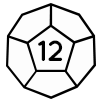
<style>
.page{position:relative;width:100px;height:100px;background:#fdfdfd}
.page>*{position:absolute;margin:0}
.t1{font:29.3px "QuicksandBold-Regular";color:#000000}
</style>
<div class="page">
<p class="t1" style="left:38px;top:40px;width:25px;height:21px">12</p>
</div>
